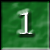
<style>
.page{position:relative;width:50px;height:50px}
.page>*{position:absolute;margin:0}
.t1{font:30px "CharlemagneStd-Bold";color:#ffffff}
</style>
<div class="page">
<p class="t1" style="left:19px;top:12px;width:14px;height:22px">1</p>
</div>
